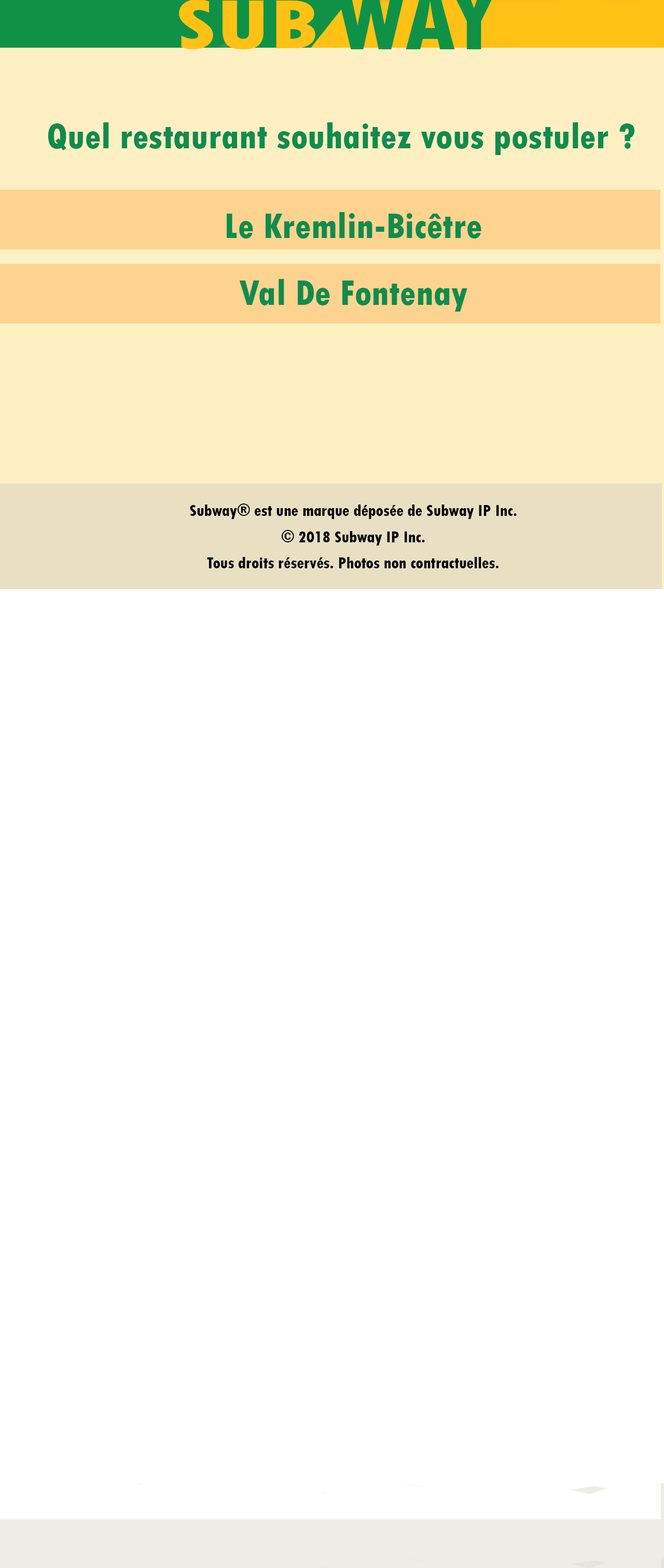
<style>
.page{position:relative;width:664px;height:1568px;background:#ffffff}
.page>*{position:absolute;margin:0}
.t1{font:73.3px "TwCenMT-CondensedExtraBold";color:#ffc214;scale:1.3 1}
.t2{font:37.3px "TwCenMT-CondensedExtraBold";color:#0f8c4e}
.t3{font:16.3px "TwCenMT-CondensedExtraBold";color:#000000}
</style>
<div class="page">
<p class="t1" style="left:179px;top:0px;width:136px;height:49px">SUB</p>
<p class="t2" style="left:48px;top:122px;width:587px;height:190px">Quel restaurant souhaitez vous postuler ?<br><br>Le Kremlin-Bicêtre<br><br><br>Val De Fontenay</p>
<p class="t3" style="left:190px;top:503px;width:326px;height:65px;text-align:center">Subway® est une marque déposée de Subway IP Inc.<br><br>© 2018 Subway IP Inc.<br><br>Tous droits réservés. Photos non contractuelles.</p>
</div>
